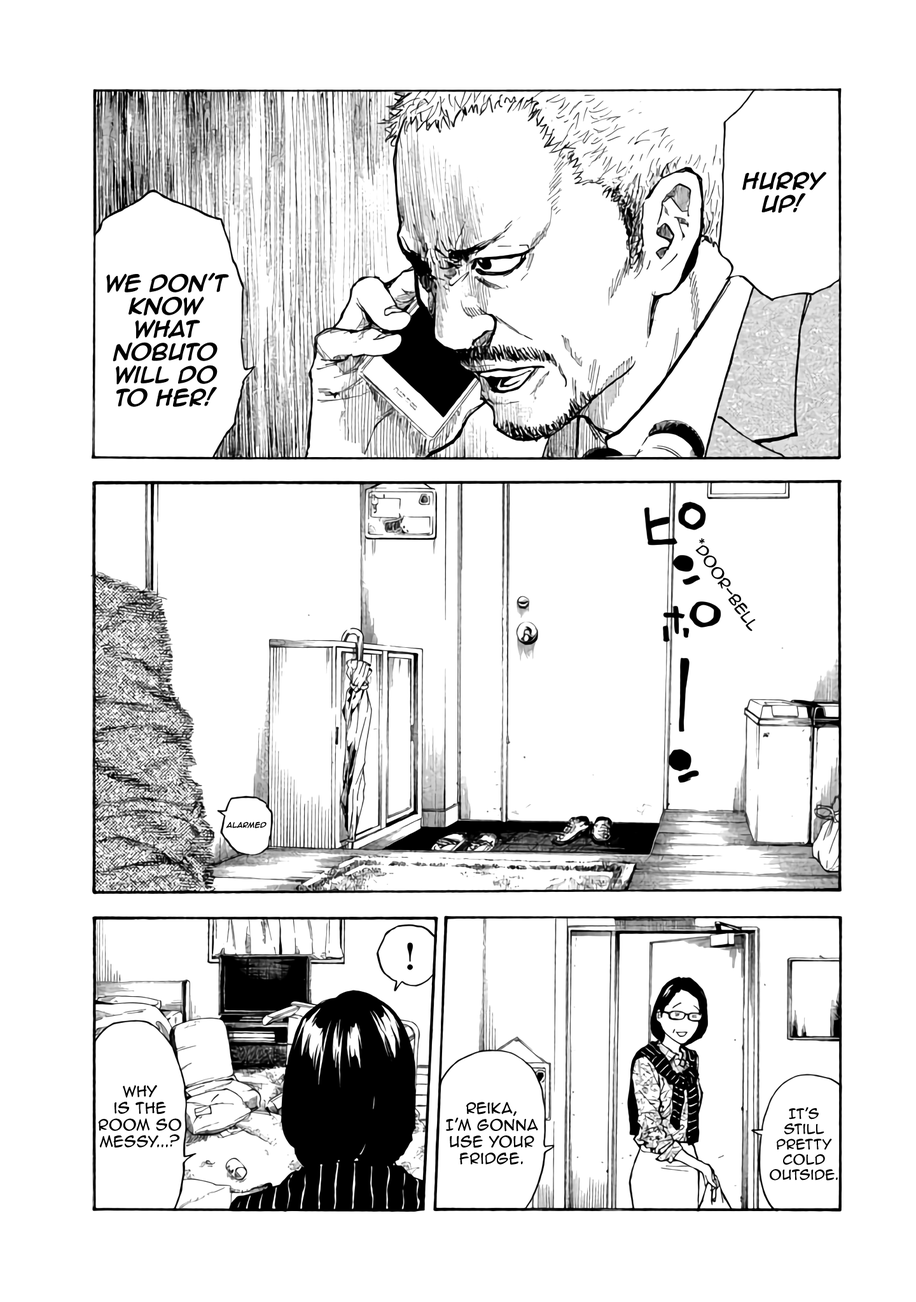
<style>
.page{position:relative;width:916px;height:1302px;background:#ffffff}
.page>*{position:absolute;margin:0}
.t1{font:19.1px "AnimeAce2.0BB-Bold";color:#000000}
.t2{font:14px "AnimeAce2.0BB";color:#000000}
.t3{font:6.4px "AnimeAce2.0BB-Bold";color:#000000}
.t4{font:12.7px "AnimeAce2.0BB";color:#000000}
</style>
<div class="page">
<p class="t1" style="left:742px;top:172px;width:84px;height:41px;text-align:center">HURRY UP!</p>
<p class="t1" style="left:106px;top:273px;width:123px;height:134px;text-align:center">We don’t know what nobuto will do to her!</p>
<p class="t2" style="left:695px;top:538px;width:60px;height:93px;rotate:56deg">*door-bell</p>
<p class="t3" style="left:226px;top:822px;width:40px;height:7px">alarmed</p>
<p class="t2" style="left:98px;top:1085px;width:83px;height:63px;text-align:center">Why <br>is the room so messy...?</p>
<p class="t2" style="left:446px;top:1102px;width:92px;height:63px;text-align:center">Reika, <br>I’m gonna use your fridge.</p>
<p class="t4" style="left:769px;top:1107px;width:68px;height:74px;text-align:center">It’s <br>still pretty cold outside.</p>
</div>
